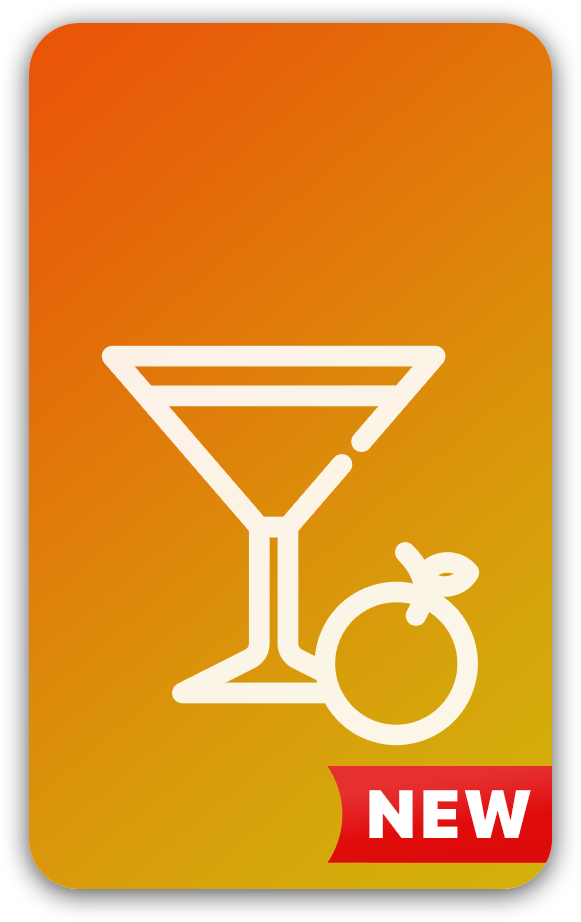
<style>
.page{position:relative;width:581px;height:922px}
.page>*{position:absolute;margin:0}
.t1{font:67.8px "SFProText-Black";color:#ffffff}
</style>
<div class="page">
<p class="t1" style="left:369px;top:790px;width:162px;height:48px">NEW</p>
</div>
